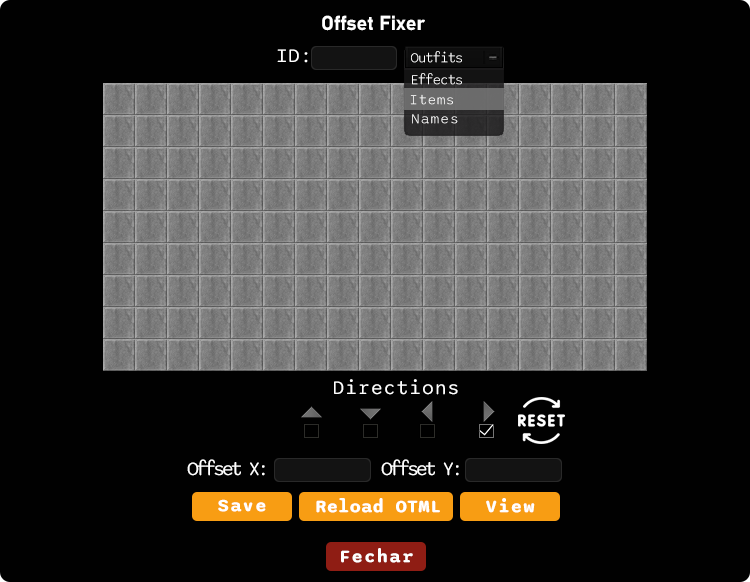
<style>
.page{position:relative;width:750px;height:582px;background:#010101}
.page>*{position:absolute;margin:0}
.t1{font:20px "Bahnschrift-Bold";color:#ffffff}
.t2{font:20px "Sono-Regular";letter-spacing:-0.02em;color:#ffffff}
.t3{font:14.3px "Sono-Light";letter-spacing:-0.1em;color:#ffffff}
.t4{font:14.3px "Sono-Light";letter-spacing:0.02em;color:#ffffff}
.t5{font:14.3px "Sono-Light";letter-spacing:0.06em}
.t6{font:20px "Sono-Regular";letter-spacing:0.02em;color:#ffffff}
.t7{font:20px "Sono-Regular";letter-spacing:-0.18em;color:#ffffff}
.t8{font:18.5px "Sono-Bold";letter-spacing:0.06em;color:#ffffff}
.t9{font:18.5px "Sono-Bold";color:#ffffff}
</style>
<div class="page">
<p class="t1" style="left:322px;top:15px;width:103px;height:16px">Offset Fixer</p>
<p class="t2" style="left:277px;top:49px;width:31px;height:14px">ID:</p>
<p class="t3" style="left:411px;top:51px;width:51px;height:12px">Outfits</p>
<p class="t3" style="left:412px;top:73px;width:50px;height:12px">Effects</p>
<p class="t4" style="left:410px;top:94px;width:43px;height:11px">Items</p>
<p class="t5" style="left:412px;top:114px;width:46px;height:10px">Names</p>
<p class="t6" style="left:334px;top:379px;width:124px;height:16px">Directions</p>
<p class="t7" style="left:187px;top:459px;width:78px;height:17px">Offset X:</p>
<p class="t7" style="left:381px;top:459px;width:78px;height:17px">Offset Y:</p>
<p class="t8" style="left:218px;top:499px;width:48px;height:13px">Save</p>
<p class="t9" style="left:316px;top:498px;width:124px;height:15px">Reload OTML</p>
<p class="t8" style="left:486px;top:498px;width:49px;height:15px">View</p>
<p class="t8" style="left:341px;top:548px;width:72px;height:15px">Fechar</p>
</div>
